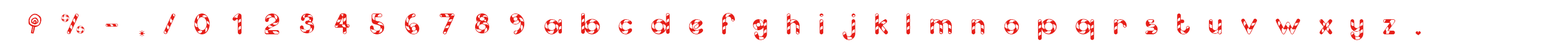
<style>
.page{position:relative;width:1568px;height:52px;background:#ffffff}
.page>*{position:absolute;margin:0}
.t1{font:30.5px "CandyCaneUnregistered";letter-spacing:0.55em;color:#e71f19}
</style>
<div class="page">
<p class="t1" style="left:28px;top:13px;width:1393px;height:27px">!%-./0123456789abcdefghijklmnopqrstuvwxyz,</p>
</div>
